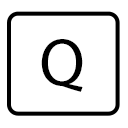
<style>
.page{position:relative;width:128px;height:128px;background:#ffffff}
.page>*{position:absolute;margin:0}
.t1{font:66.7px "MyriadPro-Regular";color:#000000}
</style>
<div class="page">
<p class="t1" style="left:41px;top:39px;width:42px;height:53px">Q</p>
</div>
